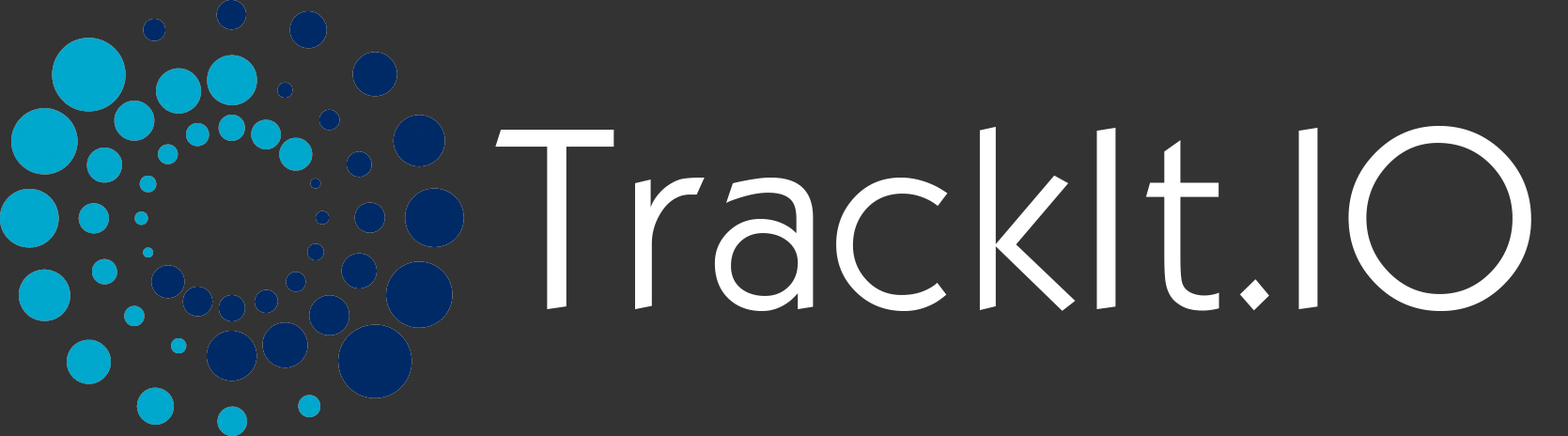
<style>
.page{position:relative;width:1568px;height:436px;background:#333333}
.page>*{position:absolute;margin:0}
.t1{font:225.5px "KabelBook";color:#ffffff}
</style>
<div class="page">
<p class="t1" style="left:495px;top:126px;width:1036px;height:185px">TrackIt.IO</p>
</div>
